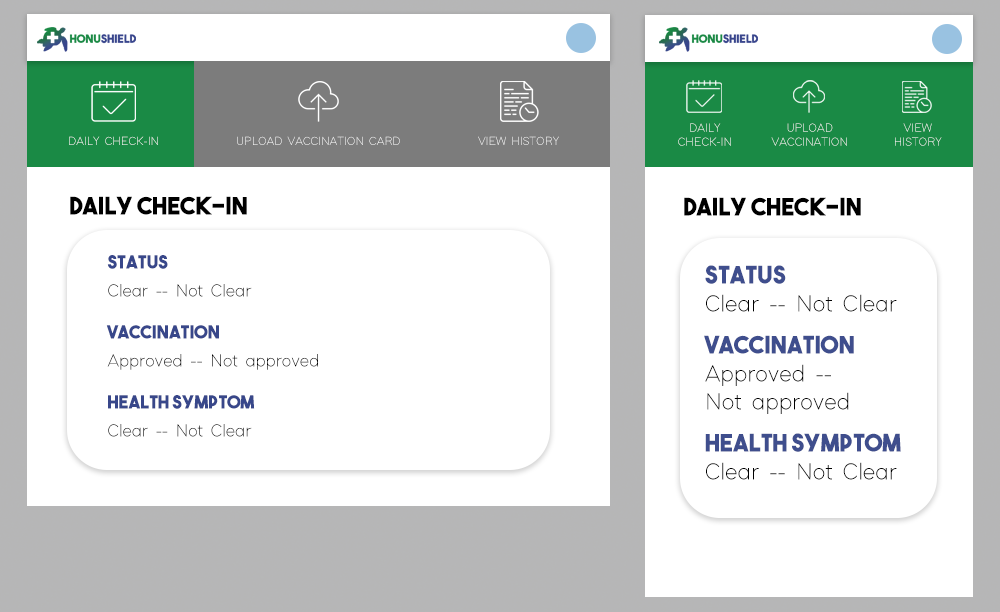
<style>
.page{position:relative;width:1000px;height:612px;background:#ffffff}
.page>*{position:absolute;margin:0}
.t1{font:12px/14px "ModernSansLight"}
.t2{font:12px "ModernSansLight"}
.t3{font:24px "TheBoldFont";color:#000000}
.t4{font:18px/14px "ModernSansLight";color:#000000}
.t5{font:18px/14px "TheBoldFont";color:#38478a}
.t6{font:24px/14px "ModernSansLight";color:#000000}
.t7{font:24px/14px "TheBoldFont";color:#3f4e8d}
</style>
<div class="page">
<p class="t1" style="left:678px;top:123px;width:53px;height:23px;text-align:center">DAILY<br>CHECK-IN</p>
<p class="t1" style="left:771px;top:123px;width:76px;height:23px;text-align:center">UPLOAD<br>VACCINATION</p>
<p class="t1" style="left:895px;top:123px;width:47px;height:23px;text-align:center">VIEW<br>HISTORY</p>
<p class="t2" style="left:69px;top:136px;width:490px;height:9px">DAILY CHECK-IN               UPLOAD VACCINATION CARD               VIEW HISTORY</p>
<p class="t3" style="left:70px;top:196px;width:177px;height:19px">Daily Check-in</p>
<p class="t3" style="left:684px;top:197px;width:177px;height:19px">Daily Check-in</p>
<p class="t4" style="left:106px;top:255px;width:212px;height:182px"><span class="t5">Status<br></span><br>Clear -- Not Clear<br><br><br><span class="t5">Vaccination<br></span><br>Approved -- Not approved<br><br><br><span class="t5">Health Symptom<br></span><br>Clear -- Not Clear</p>
<p class="t6" style="left:704px;top:265px;width:197px;height:215px"><span class="t7">Status<br></span><br>Clear -- Not Clear<br><br><br><span class="t7">Vaccination<br></span><br>Approved -- <br><br>Not approved<br><br><br><span class="t7">Health Symptom<br></span><br>Clear -- Not Clear</p>
</div>
